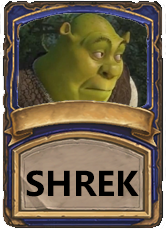
<style>
.page{position:relative;width:166px;height:229px}
.page>*{position:absolute;margin:0}
.t1{font:36px "MicrosoftTaiLe-Bold";color:#000000}
</style>
<div class="page">
<p class="t1" style="left:26px;top:170px;width:113px;height:27px">SHREK</p>
</div>
